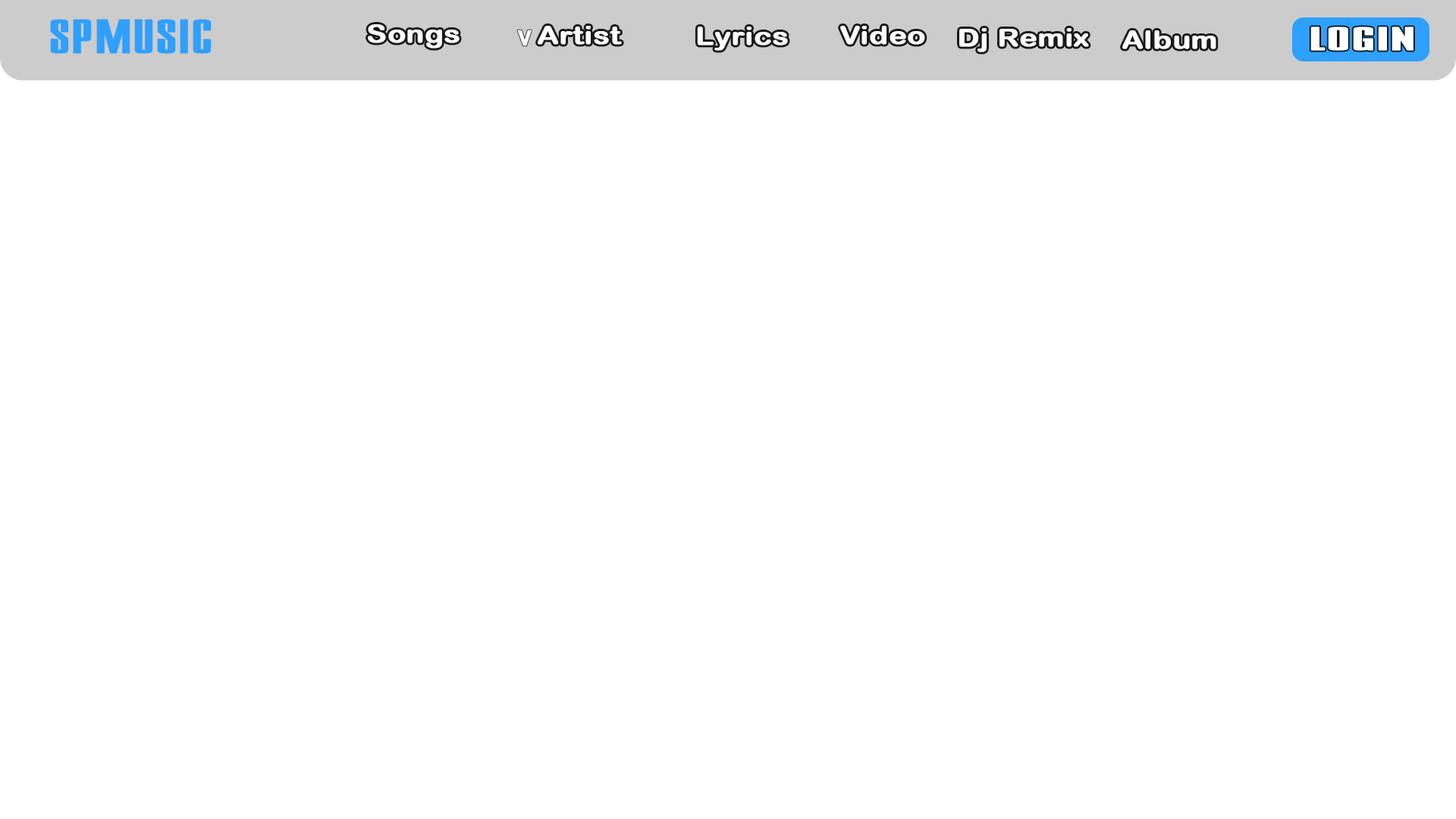
<style>
.page{position:relative;width:1456px;height:819px;background:#ffffff}
.page>*{position:absolute;margin:0}
.t1{font:46.5px "Corporate";color:#2fa0ff;font-weight:bold;scale:1.96 1}
.t2{font:24.7px "ArialRoundedMTBold";color:#fdfdfd;font-weight:bold;scale:1.2 1}
.t3{font:31.8px "Corporate";color:#fefefe;font-weight:bold;scale:3.16 1}
</style>
<div class="page">
<p class="t1" style="left:50px;top:19px;width:162px;height:35px">SPMUSIC</p>
<p class="t2" style="left:368px;top:24px;width:92px;height:25px">Songs</p>
<p class="t2" style="left:517px;top:30px;width:15px;height:16px;rotate:89deg">&gt;</p>
<p class="t2" style="left:538px;top:26px;width:84px;height:19px">Artist</p>
<p class="t2" style="left:697px;top:27px;width:91px;height:24px">Lyrics</p>
<p class="t2" style="left:840px;top:26px;width:85px;height:19px">Video</p>
<p class="t2" style="left:959px;top:28px;width:130px;height:24px">Dj Remix</p>
<p class="t3" style="left:1310px;top:27px;width:104px;height:24px">LOGIN</p>
<p class="t2" style="left:1122px;top:30px;width:94px;height:19px">Album</p>
</div>
